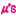
<style>
.page{position:relative;width:16px;height:16px;background:#ffffff}
.page>*{position:absolute;margin:0}
.t1{font:11px "mikachan-PB";letter-spacing:-0.52em;color:#ea007f;font-weight:bold}
.t2{font:11px "mikachan-PB";letter-spacing:-0.72em;color:#ea007f;font-weight:bold}
.t3{font:10px "mikachan-PB";letter-spacing:-0.72em;color:#ea007f;font-weight:bold}
</style>
<div class="page">
<p class="t1" style="left:1px;top:3px;width:15px;height:12px">μ<span class="t2">’</span><span class="t3">ｓ</span></p>
</div>
